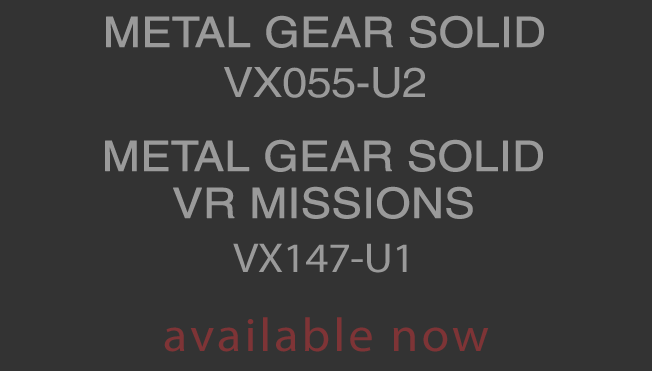
<style>
.page{position:relative;width:652px;height:371px;background:#333333}
.page>*{position:absolute;margin:0}
.t1{font:41.8px "Helvetica";letter-spacing:-0.016em;color:#9a9a9a;font-weight:bold;scale:1.08 1}
.t2{font:41.8px "Helvetica";letter-spacing:-0.016em;color:#9a9a9a;scale:1.08 1}
.t3{font:41.8px/47px "Helvetica";letter-spacing:-0.016em;color:#9a9a9a;font-weight:bold;scale:1.08 1}
.t4{font:41.8px/54px "MyriadPro-Regular";letter-spacing:-0.016em;color:#9a9a9a;scale:1.08 1}
.t5{font:47.5px "MyriadPro-Regular";letter-spacing:0.06em;color:#7e3436;scale:1.06 1}
</style>
<div class="page">
<p class="t1" style="left:106px;top:15px;width:438px;height:83px;text-align:center">METAL GEAR SOLID<br><span class="t2">VX055-U2</span></p>
<p class="t3" style="left:105px;top:139px;width:438px;height:134px;text-align:center">METAL GEAR SOLID<br>VR MISSIONS<br><span class="t4">VX147-U1</span></p>
<p class="t5" style="left:164px;top:317px;width:325px;height:35px">available now</p>
</div>
